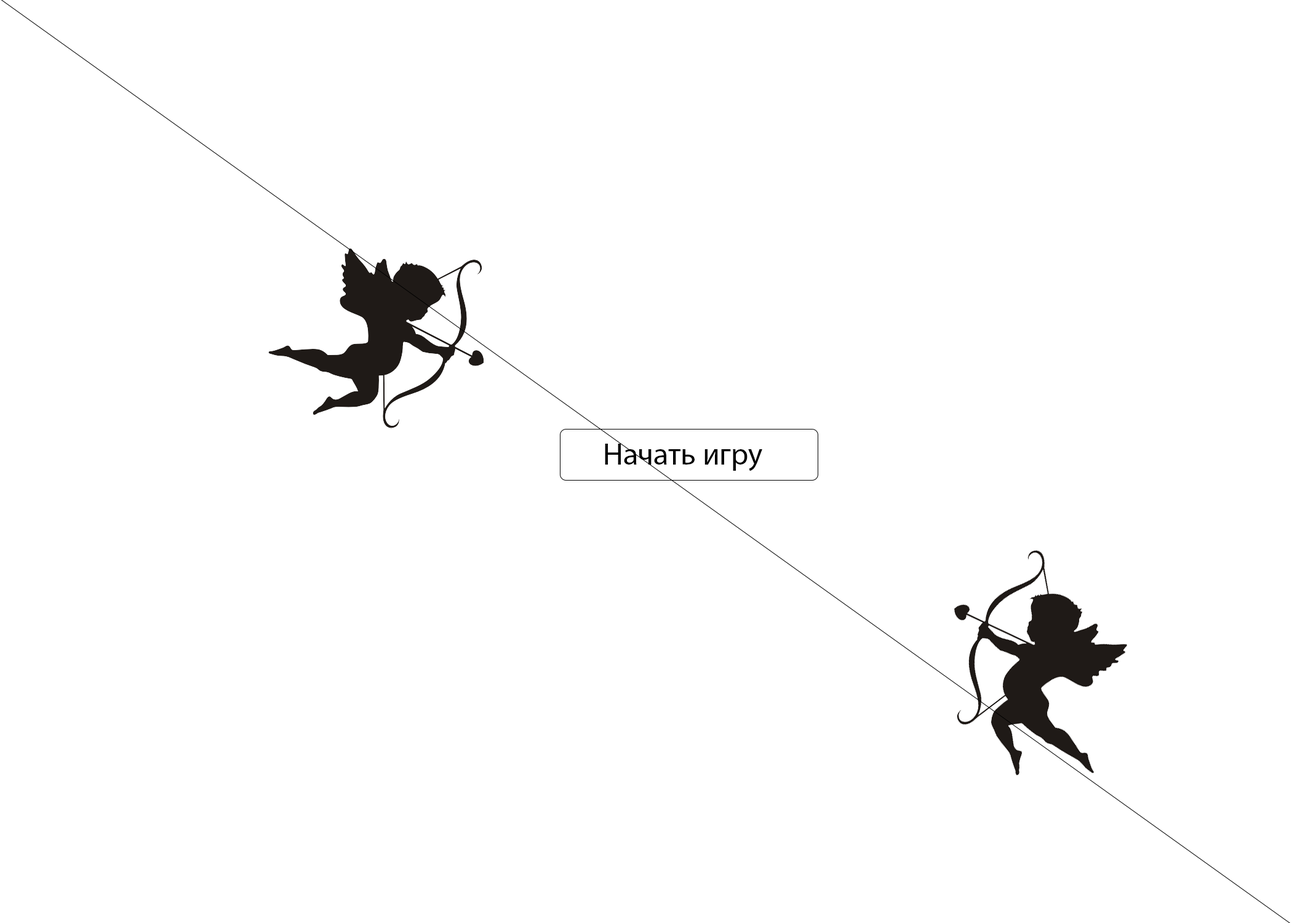
<style>
.page{position:relative;width:1292px;height:923px;background:#ffffff}
.page>*{position:absolute;margin:0}
.t1{font:30.8px "MyriadPro-Regular";color:#000000}
</style>
<div class="page">
<p class="t1" style="left:605px;top:444px;width:157px;height:27px">Начать игру</p>
</div>
